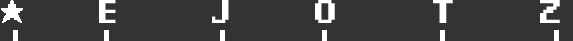
<style>
.page{position:relative;width:573px;height:41px;background:#333333}
.page>*{position:absolute;margin:0}
.t1{font:33.8px "PixelDigivolve";color:#ffffff;text-transform:uppercase}
</style>
<div class="page">
<p class="t1" style="left:99px;top:0px;width:17px;height:23px">E</p>
<p class="t1" style="left:212px;top:0px;width:17px;height:23px">J</p>
<p class="t1" style="left:315px;top:0px;width:20px;height:23px">O</p>
<p class="t1" style="left:433px;top:0px;width:20px;height:23px">T</p>
<p class="t1" style="left:540px;top:0px;width:20px;height:23px">Z</p>
</div>
